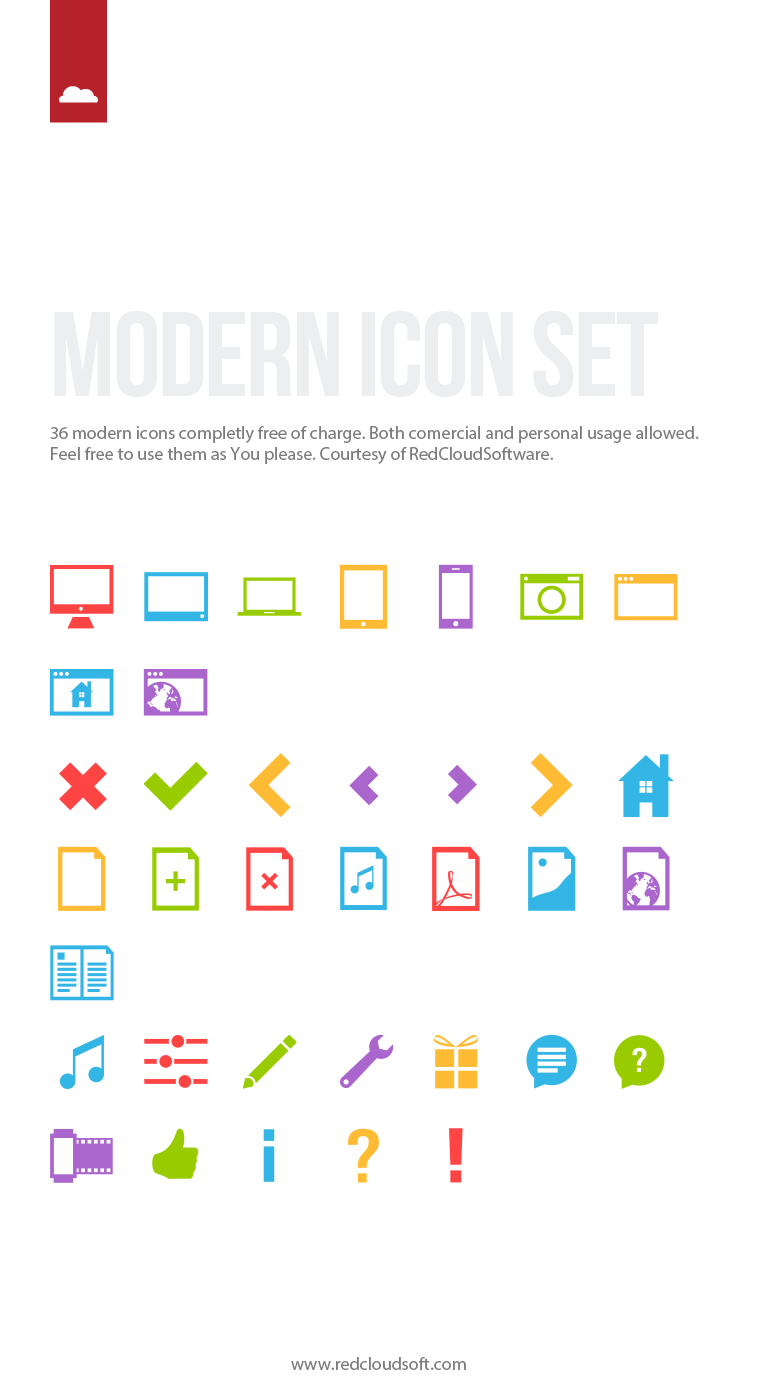
<style>
.page{position:relative;width:758px;height:1400px;background:#ffffff}
.page>*{position:absolute;margin:0}
.t1{font:120px "BebasNeue";letter-spacing:-0.02em;color:#eceef0}
.t2{font:18px "MyriadPro-Regular";color:#7d7d7d}
</style>
<div class="page">
<p class="t1" style="left:54px;top:311px;width:604px;height:86px">Modern icon set</p>
<p class="t2" style="left:50px;top:426px;width:649px;height:38px">36 modern icons completly free of charge. Both comercial and personal usage allowed.<br>Feel free to use them as You please. Courtesy of RedCloudSoftware.</p>
<p class="t2" style="left:291px;top:1357px;width:175px;height:13px">www.redcloudsoft.com</p>
</div>
